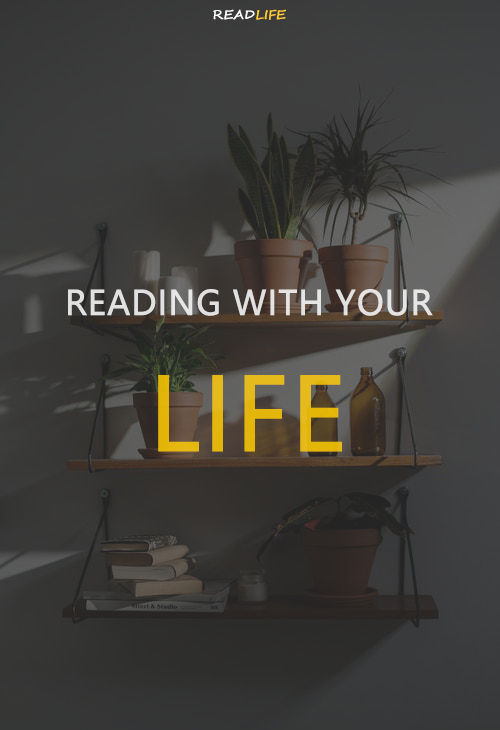
<style>
.page{position:relative;width:500px;height:730px}
.page>*{position:absolute;margin:0}
.t1{font:12.5px "SegoeScript";color:#ffffff;text-transform:uppercase;font-weight:bold}
.t2{font:12.5px "SegoeScript";color:#ffcc33;text-transform:uppercase;font-weight:bold}
.t3{font:33.3px "MicrosoftYaHei";color:#e2e1e1;text-transform:uppercase;font-weight:bold}
.t4{font:100px "MicrosoftYaHei";color:#e4b70e;text-transform:uppercase;font-weight:bold}
</style>
<div class="page">
<p class="t1" style="left:213px;top:9px;width:73px;height:11px">READ<span class="t2">LIFE</span></p>
<p class="t3" style="left:68px;top:289px;width:365px;height:27px">READing with YOUR</p>
<p class="t4" style="left:158px;top:375px;width:184px;height:77px">LIFE</p>
</div>
